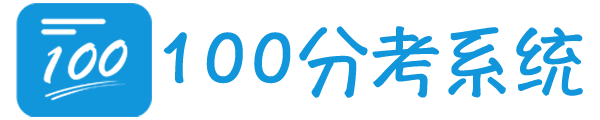
<style>
.page{position:relative;width:600px;height:120px;background:#ffffff}
.page>*{position:absolute;margin:0}
.t1{font:75px "HannotateTC-W7";letter-spacing:-0.005em;color:#1296db}
</style>
<div class="page">
<p class="t1" style="left:163px;top:26px;width:420px;height:72px">100分考试系统</p>
</div>
